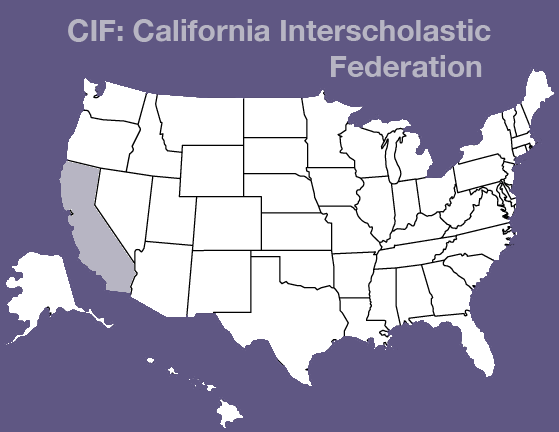
<style>
.page{position:relative;width:559px;height:432px;background:#5f5783}
.page>*{position:absolute;margin:0}
.t1{font:30px "HelveticaNeue-Bold";color:#b7b5c3}
</style>
<div class="page">
<p class="t1" style="left:68px;top:19px;width:423px;height:59px;text-align:right">CIF: California Interscholastic<br>Federation</p>
</div>
